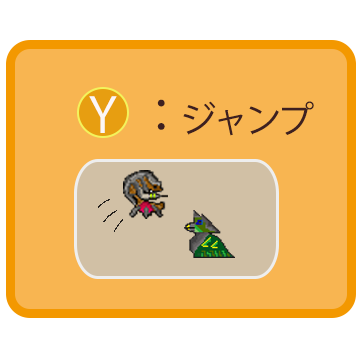
<style>
.page{position:relative;width:360px;height:360px;background:#f8b551}
.page>*{position:absolute;margin:0}
.t1{font:36px "KozGoPr6N-Regular";letter-spacing:-0.1em;color:#3e2020}
.t2{font:48px "KozGoPr6N-Regular";letter-spacing:-0.1em;color:#3e2020}
.t3{font:48px "KozGoPr6N-Regular";letter-spacing:-0.1em;color:#fcf7f7}
</style>
<div class="page">
<p class="t1" style="left:89px;top:96px;width:225px;height:40px"><span class="t2">  </span><span class="t3">Y    </span><span class="t2">：</span>ジャンプ</p>
</div>
